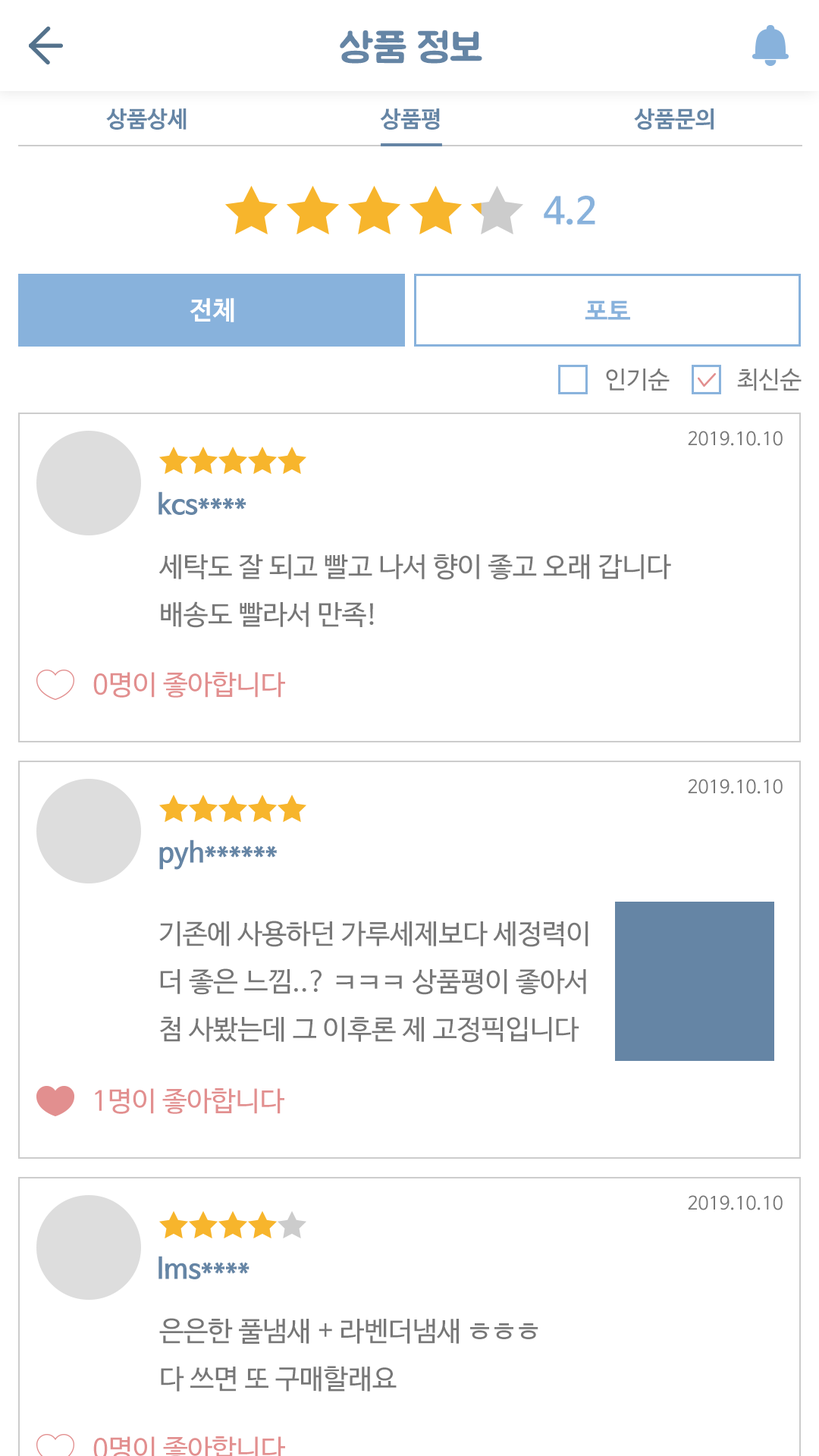
<style>
.page{position:relative;width:819px;height:1456px;background:#ffffff}
.page>*{position:absolute;margin:0}
.t1{font:40.9px "BMJUA";color:#6585a5}
.t2{font:22.7px "NanumBarunGothicBold";color:#6585a5}
.t3{font:36.4px "NanumBarunGothicBold";color:#88b2dc}
.t4{font:25.8px "NanumBarunGothicBold";color:#ffffff}
.t5{font:25.8px "NanumBarunGothicBold";color:#88b2dc}
.t6{font:24.3px "NanumBarunGothic";color:#777777}
.t7{font:18.2px "NanumBarunGothic";color:#777777}
.t8{font:27.3px "NanumBarunGothicBold";color:#6585a5}
.t9{font:27.3px "NanumBarunGothic";color:#777777}
.t10{font:27.3px "NanumBarunGothic";color:#e28f8f}
</style>
<div class="page">
<p class="t1" style="left:340px;top:30px;width:142px;height:34px">상품 정보</p>
<p class="t2" style="left:106px;top:108px;width:81px;height:22px">상품상세</p>
<p class="t2" style="left:380px;top:108px;width:60px;height:22px">상품평</p>
<p class="t2" style="left:634px;top:108px;width:80px;height:22px">상품문의</p>
<p class="t3" style="left:544px;top:196px;width:51px;height:29px">4.2</p>
<p class="t4" style="left:190px;top:298px;width:44px;height:24px">전체</p>
<p class="t5" style="left:585px;top:300px;width:45px;height:20px">포토</p>
<p class="t6" style="left:606px;top:369px;width:64px;height:22px">인기순</p>
<p class="t6" style="left:737px;top:369px;width:65px;height:22px">최신순</p>
<p class="t7" style="left:688px;top:431px;width:95px;height:15px">2019.10.10</p>
<p class="t8" style="left:158px;top:491px;width:88px;height:24px">kcs****</p>
<p class="t9" style="left:158px;top:554px;width:513px;height:74px">세탁도 잘 되고 빨고 나서 향이 좋고 오래 갑니다<br>배송도 빨라서 만족!</p>
<p class="t10" style="left:93px;top:672px;width:192px;height:26px">0명이 좋아합니다</p>
<p class="t7" style="left:688px;top:779px;width:95px;height:15px">2019.10.10</p>
<p class="t8" style="left:159px;top:839px;width:118px;height:31px">pyh******</p>
<p class="t9" style="left:159px;top:921px;width:429px;height:122px">기존에 사용하던 가루세제보다 세정력이<br>더 좋은 느낌..? ㅋㅋㅋ 상품평이 좋아서<br>첨 사봤는데 그 이후론 제 고정픽입니다</p>
<p class="t10" style="left:95px;top:1088px;width:189px;height:26px">1명이 좋아합니다</p>
<p class="t7" style="left:688px;top:1195px;width:95px;height:15px">2019.10.10</p>
<p class="t8" style="left:158px;top:1256px;width:91px;height:23px">lms****</p>
<p class="t9" style="left:159px;top:1318px;width:379px;height:74px">은은한 풀냄새 + 라벤더냄새 ㅎㅎㅎ    <br>다 쓰면 또 구매할래요</p>
</div>
